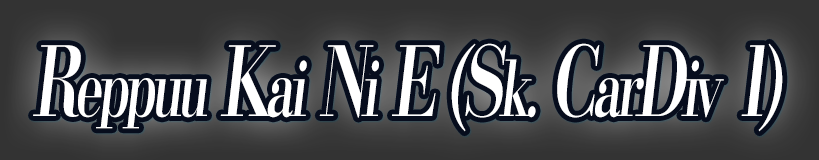
<style>
.page{position:relative;width:819px;height:160px}
.page>*{position:absolute;margin:0}
.t1{font:76.8px "KochoStd-Heavy";letter-spacing:-0.08em;color:#ffffff;font-style:italic;scale:0.66 1}
.t2{font:96px "KochoStd-Heavy";letter-spacing:-0.08em;color:#ffffff;font-style:italic;scale:0.66 1}
</style>
<div class="page">
<p class="t1" style="left:33px;top:43px;width:750px;height:89px"><span class="t2">R</span>eppuu<span class="t2"> K</span>ai<span class="t2"> N</span>i<span class="t2"> E (S</span>k.<span class="t2"> C</span>ar<span class="t2">D</span>iv<span class="t2"> 1)</span></p>
</div>
